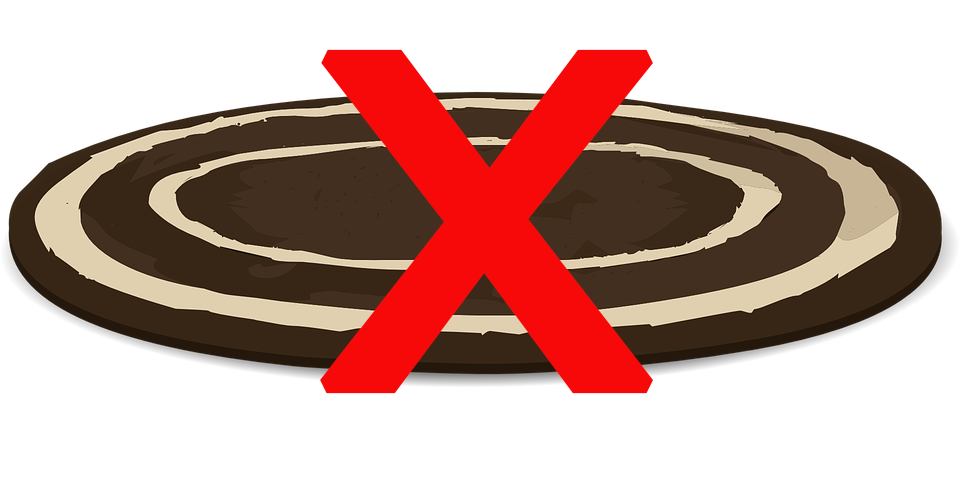
<style>
.page{position:relative;width:960px;height:480px;background:#ffffff}
.page>*{position:absolute;margin:0}
.t1{font:600px "Verdana";color:#f80909;font-weight:bold}
</style>
<div class="page">
<p class="t1" style="left:320px;top:49px;width:333px;height:345px">x</p>
</div>
